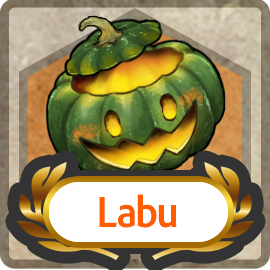
<style>
.page{position:relative;width:270px;height:270px}
.page>*{position:absolute;margin:0}
.t1{font:45px "AdobeClean-Bold";letter-spacing:-0.04em;color:#ff5d00;scale:0.9 1}
</style>
<div class="page">
<p class="t1" style="left:99px;top:194px;width:78px;height:34px">Labu</p>
</div>
